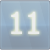
<style>
.page{position:relative;width:50px;height:50px}
.page>*{position:absolute;margin:0}
.t1{font:30px "Tahoma";letter-spacing:0.025em;color:#faf8f3}
</style>
<div class="page">
<p class="t1" style="left:11px;top:11px;width:29px;height:23px;opacity:0.85">11</p>
</div>
